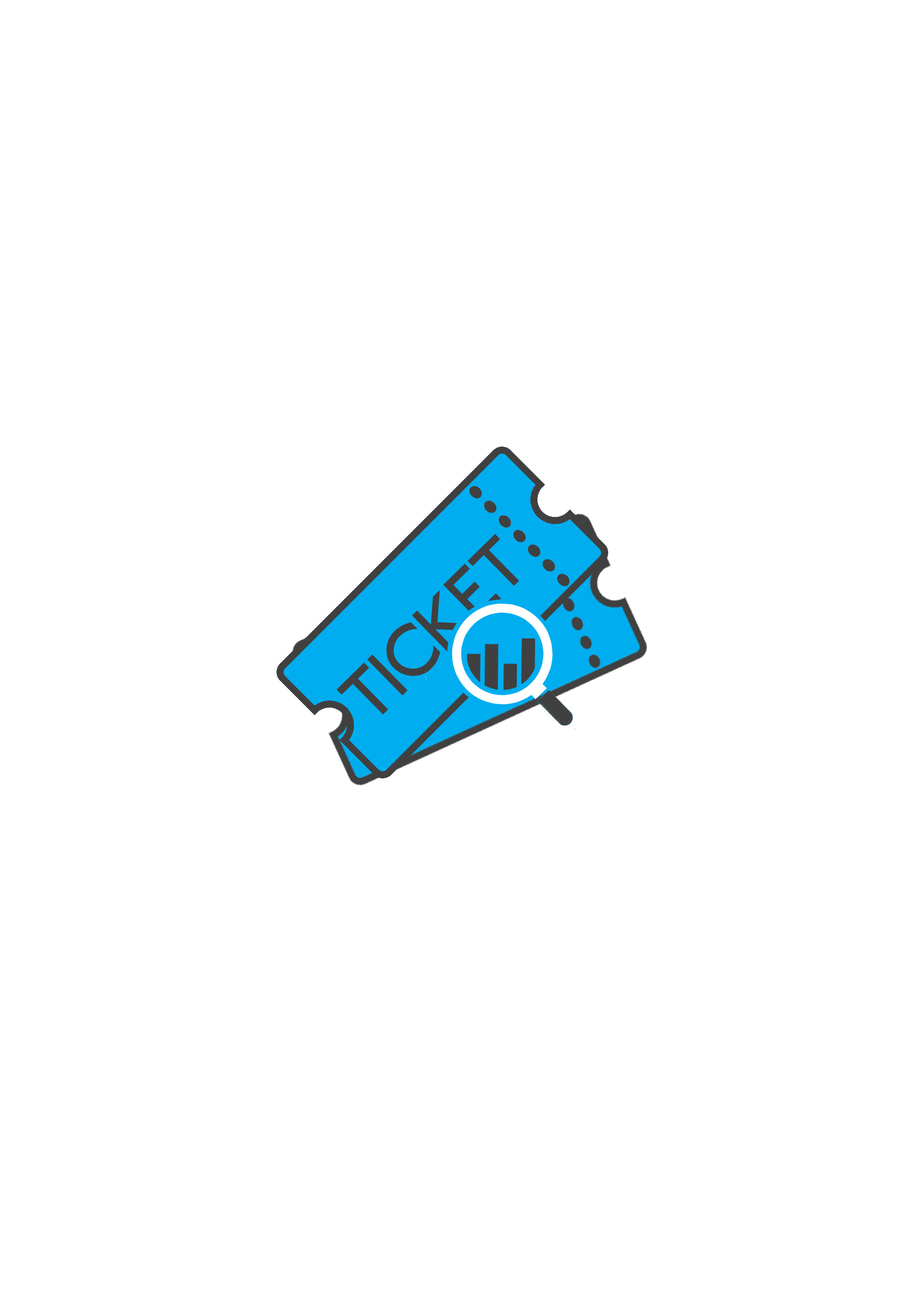
<style>
.page{position:relative;width:918px;height:1299px;background:#ffffff}
.page>*{position:absolute;margin:0}
.t1{font:71.8px "Railway";color:#404040}
</style>
<div class="page">
<p class="t1" style="left:337px;top:534px;width:182px;height:181px;rotate:-44deg">TICKET</p>
</div>
